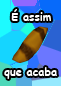
<style>
.page{position:relative;width:61px;height:86px}
.page>*{position:absolute;margin:0}
.t1{font:11px "ComicSansMS-Bold";color:#ffffff}
</style>
<div class="page">
<p class="t1" style="left:11px;top:9px;width:40px;height:12px">É assim</p>
<p class="t1" style="left:4px;top:67px;width:53px;height:12px">que acaba</p>
</div>
